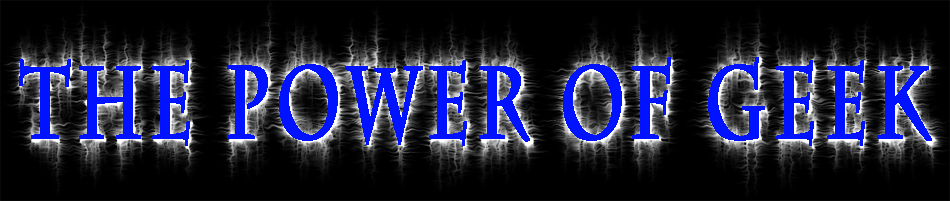
<style>
.page{position:relative;width:950px;height:201px;background:#000000}
.page>*{position:absolute;margin:0}
.t1{font:102.1px "CharlemagneStd-Bold";letter-spacing:0.075em;color:#0012ff;font-weight:bold;scale:0.67 1}
</style>
<div class="page">
<p class="t1" style="left:19px;top:57px;width:913px;height:89px">The Power of Geek</p>
</div>
